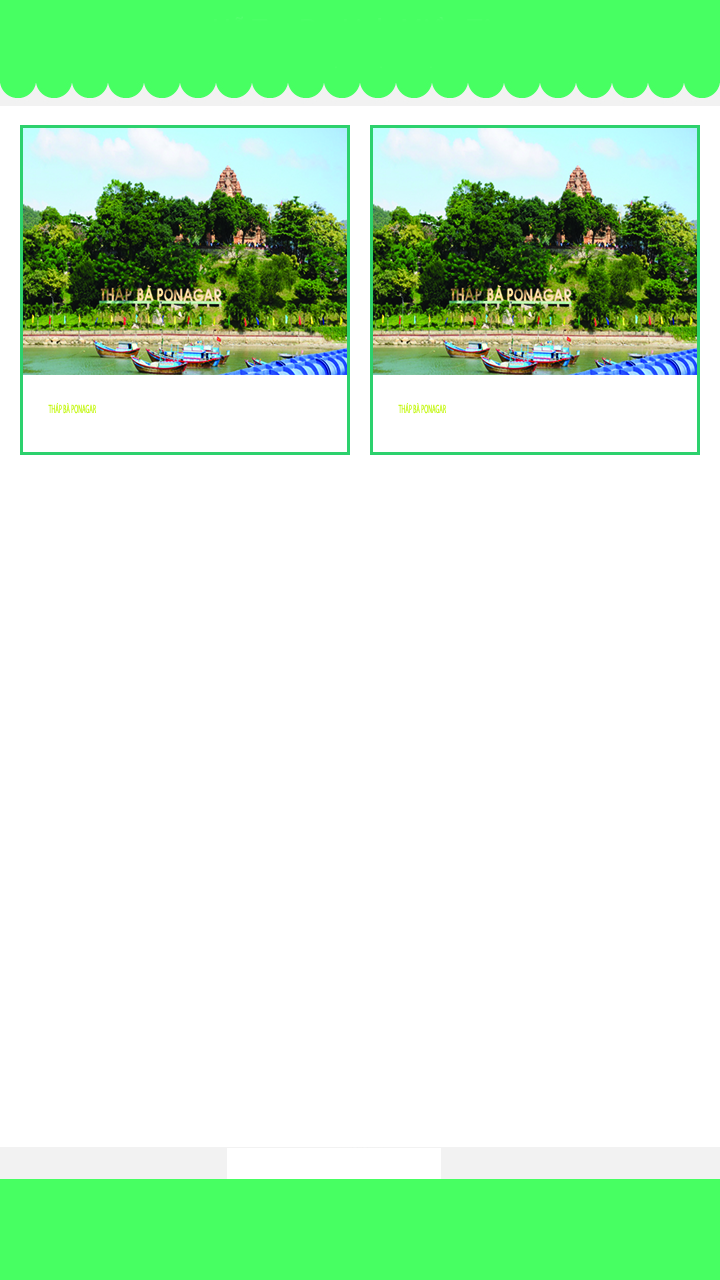
<style>
.page{position:relative;width:720px;height:1280px;background:#ffffff}
.page>*{position:absolute;margin:0}
.t1{font:12px "MyriadPro-Regular";color:#c6f81a;scale:0.48 1}
</style>
<div class="page">
<p class="t1" style="left:48px;top:403px;width:48px;height:11px">THÁP BÀ PONAGAR</p>
<p class="t1" style="left:398px;top:403px;width:48px;height:11px">THÁP BÀ PONAGAR</p>
</div>
